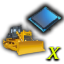
<style>
.page{position:relative;width:64px;height:64px;background:#ffffff}
.page>*{position:absolute;margin:0}
.t1{font:16px "TrajanPro-Bold";color:#deff01;font-style:italic}
</style>
<div class="page">
<p class="t1" style="left:46px;top:47px;width:15px;height:12px">X</p>
</div>
